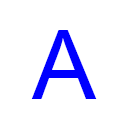
<style>
.page{position:relative;width:128px;height:128px;background:#ffffff}
.page>*{position:absolute;margin:0}
.t1{font:96px "ArialMT";color:#0000ff}
</style>
<div class="page">
<p class="t1" style="left:31px;top:30px;width:66px;height:69px">A</p>
</div>
